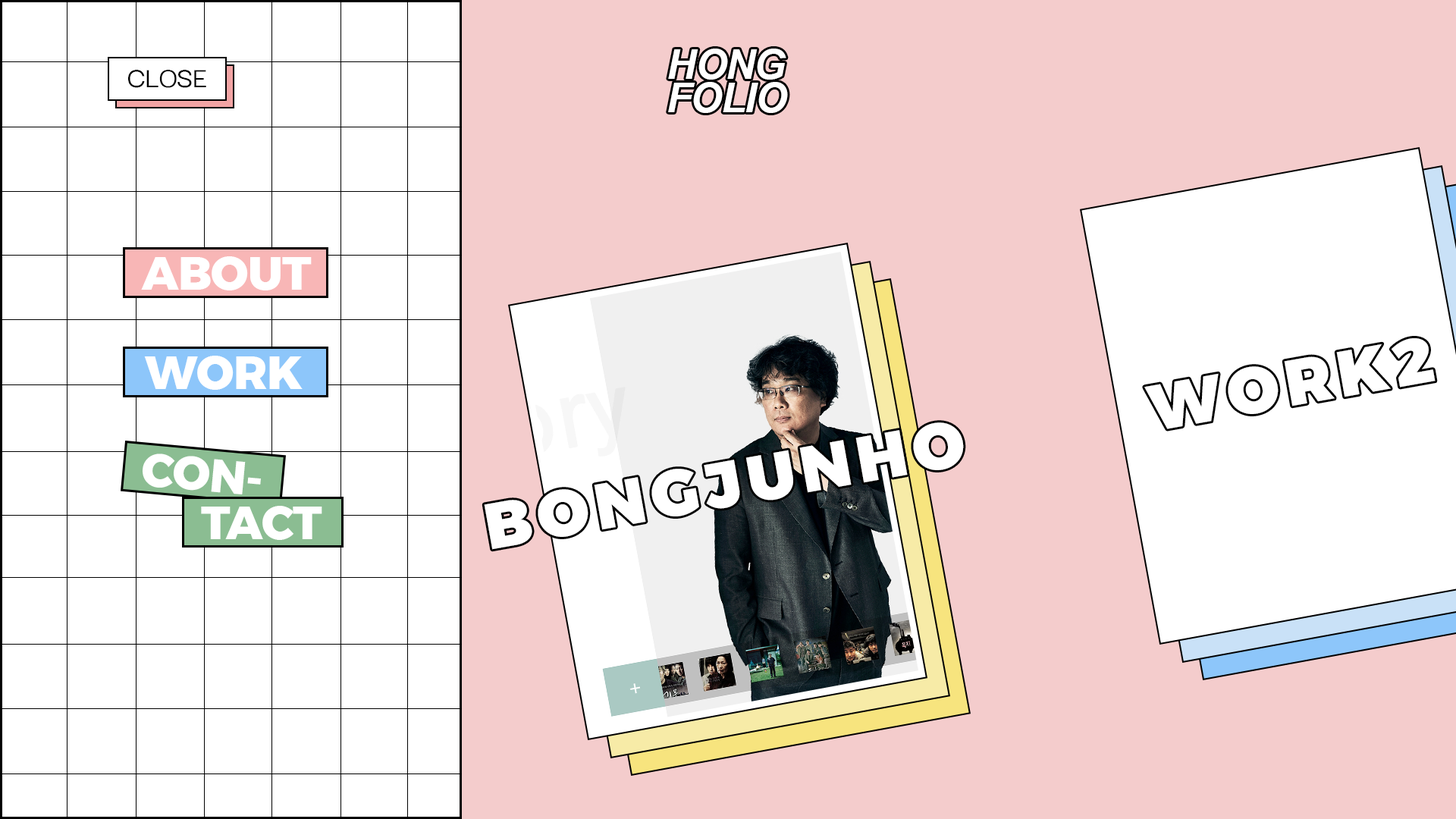
<style>
.page{position:relative;width:1456px;height:819px;background:#ffffff}
.page>*{position:absolute;margin:0}
.t1{font:40.8px/33.1px "Arial-BoldItalicMT";letter-spacing:-0.03em;color:#ffffff}
.t2{font:30.3px "DarkerGrotesque-Medium";letter-spacing:-0.01em;color:#000000}
.t3{font:46.6px "Montserrat-ExtraBold";letter-spacing:-0.01em;color:#ffffff}
.t4{font:64.6px "Montserrat-Black";letter-spacing:0.1em;color:#ffffff}
</style>
<div class="page">
<p class="t1" style="left:668px;top:49px;width:120px;height:64px">HONG<br>FOLIO</p>
<p class="t2" style="left:128px;top:70px;width:78px;height:18px">CLOSE</p>
<p class="t3" style="left:141px;top:256px;width:171px;height:34px">ABOUT</p>
<p class="t3" style="left:144px;top:356px;width:159px;height:34px">WORK</p>
<p class="t4" style="left:484px;top:422px;width:480px;height:128px;rotate:-10deg">BONGJUNHO</p>
<p class="t3" style="left:143px;top:453px;width:118px;height:41px;rotate:5deg">CON-</p>
<p class="t3" style="left:201px;top:506px;width:121px;height:34px">TACT</p>
</div>
